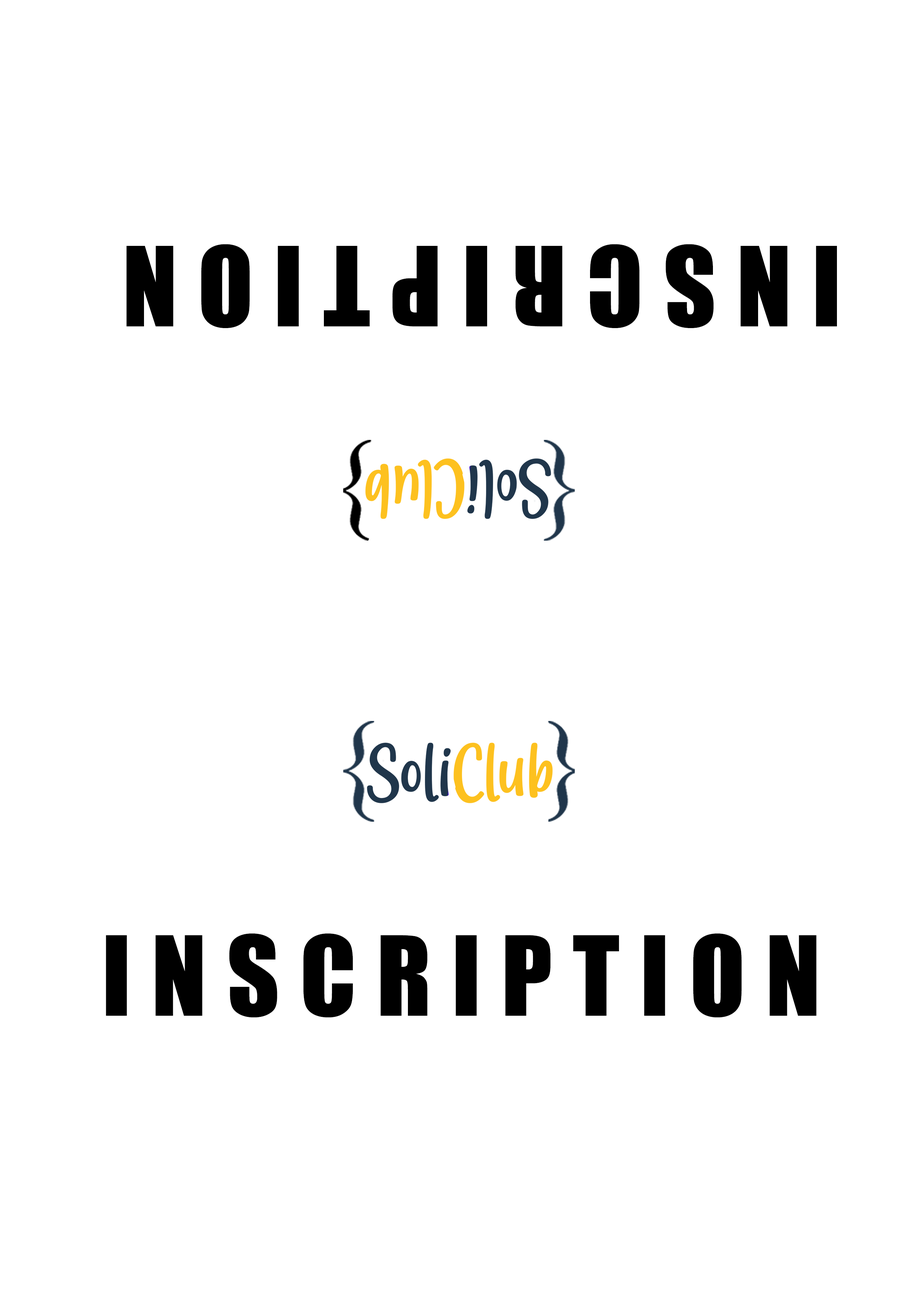
<style>
.page{position:relative;width:918px;height:1299px;background:#ffffff}
.page>*{position:absolute;margin:0}
.t1{font:101.8px "Impact";letter-spacing:0.2em;color:#000000;text-transform:uppercase}
</style>
<div class="page">
<p class="t1" style="left:126px;top:244px;width:711px;height:84px;rotate:180deg">Inscription</p>
<p class="t1" style="left:106px;top:933px;width:711px;height:84px">Inscription</p>
</div>
